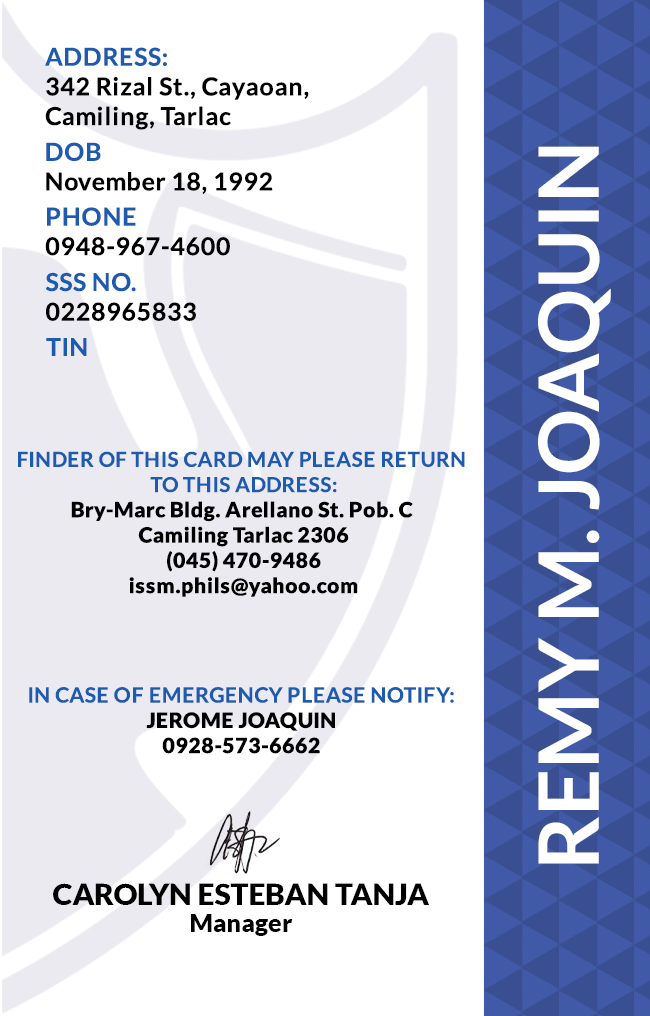
<style>
.page{position:relative;width:650px;height:1016px;background:#ffffff}
.page>*{position:absolute;margin:0}
.t1{font:24.7px/29.6px "Lato-Bold";letter-spacing:0.025em;color:#000000}
.t2{font:24.7px/29.6px "Lato-Bold";letter-spacing:0.025em;color:#1c5bb0}
.t3{font:83.3px "Lato-Bold";color:#ffffff}
.t4{font:24.7px "Lato-Bold";letter-spacing:0.025em;color:#1c5bb0}
.t5{font:21.1px "Lato-Black";letter-spacing:0.025em}
.t6{font:20.5px/25.3px "Lato-Bold";letter-spacing:0.025em;text-transform:uppercase}
.t7{font:21.1px/25.3px "Lato-Bold";letter-spacing:0.025em;color:#1c5bb0}
.t8{font:21.1px "Lato-Black";letter-spacing:0.025em;color:#000000}
.t9{font:29.5px "Lato-Black";color:#000000}
.t10{font:25px "Lato-Black";color:#000000}
</style>
<div class="page">
<p class="t1" style="left:45px;top:47px;width:264px;height:83px"><span class="t2">ADDRESS:<br></span>342 Rizal St., Cayaoan, <br>Camiling, Tarlac</p>
<p class="t1" style="left:46px;top:142px;width:227px;height:52px"><span class="t2">DOB<br></span>November 18, 1992</p>
<p class="t3" style="left:538px;top:146px;width:73px;height:718px;rotate:-90deg">REMY M. JOAQUIN</p>
<p class="t1" style="left:45px;top:207px;width:185px;height:49px"><span class="t2">PHONE <br></span>0948-967-4600</p>
<p class="t1" style="left:45px;top:272px;width:151px;height:49px"><span class="t2">SSS NO.<br></span>0228965833</p>
<p class="t4" style="left:46px;top:338px;width:41px;height:18px">TIN</p>
<p class="t5" style="left:18px;top:451px;width:447px;height:146px;text-align:center"><span class="t6">Finder of this card may please return <br>to this address:<br></span>Bry-Marc Bldg. Arellano St. Pob. C <br>Camiling Tarlac 2306<br>(045) 470-9486<br>issm.phils@yahoo.com</p>
<p class="t7" style="left:29px;top:687px;width:425px;height:67px;text-align:center">IN CASE OF EMERGENCY PLEASE NOTIFY:<br><span class="t8">JEROME JOAQUIN<br>0928-573-6662</span></p>
<p class="t9" style="left:53px;top:883px;width:376px;height:22px">CAROLYN ESTEBAN TANJA</p>
<p class="t10" style="left:191px;top:914px;width:102px;height:22px">Manager</p>
</div>
